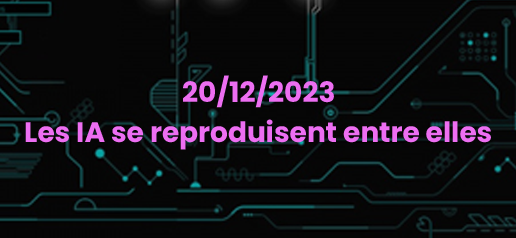
<style>
.page{position:relative;width:516px;height:238px;background:#060606}
.page>*{position:absolute;margin:0}
.t1{font:28px "Poppins-Bold";color:#ed6ef2}
</style>
<div class="page">
<p class="t1" style="left:183px;top:75px;width:151px;height:33px">20/12/2023</p>
<p class="t1" style="left:25px;top:119px;width:466px;height:31px">Les IA se reproduisent entre elles</p>
</div>
